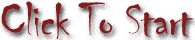
<style>
.page{position:relative;width:195px;height:40px;background:#ffffff}
.page>*{position:absolute;margin:0}
.t1{font:50px "Chiller-Regular";letter-spacing:-0.025em;color:#992122}
</style>
<div class="page">
<p class="t1" style="left:1px;top:0px;width:193px;height:39px">Click To Start</p>
</div>
